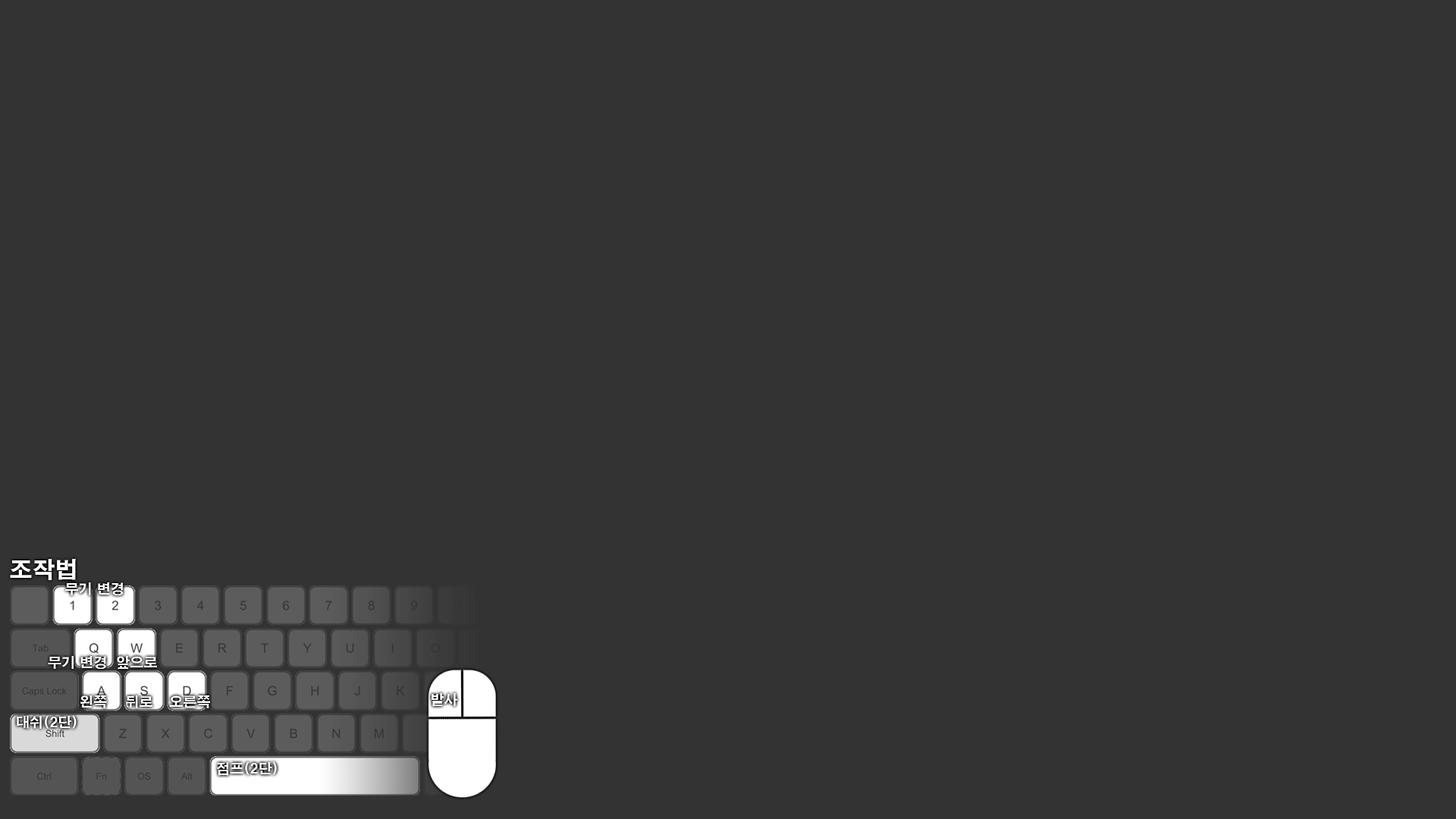
<style>
.page{position:relative;width:1456px;height:819px;background:#333333}
.page>*{position:absolute;margin:0}
.t1{font:22.7px "H2gtrE";color:#ffffff;text-transform:uppercase}
.t2{font:13.7px "H2gtrE";color:#ffffff;text-transform:uppercase}
</style>
<div class="page">
<p class="t1" style="left:10px;top:559px;width:66px;height:21px">조작법</p>
<p class="t2" style="left:65px;top:582px;width:59px;height:13px">무기 변경</p>
<p class="t2" style="left:48px;top:656px;width:58px;height:13px">무기 변경</p>
<p class="t2" style="left:117px;top:656px;width:40px;height:13px">앞으로</p>
<p class="t2" style="left:80px;top:695px;width:27px;height:13px">왼쪽</p>
<p class="t2" style="left:126px;top:695px;width:26px;height:13px">뒤로</p>
<p class="t2" style="left:169px;top:695px;width:41px;height:13px">오른쪽</p>
<p class="t2" style="left:431px;top:693px;width:26px;height:13px">발사</p>
<p class="t2" style="left:17px;top:715px;width:60px;height:14px">대쉬(2단)</p>
<p class="t2" style="left:216px;top:761px;width:61px;height:15px">점프(2단)</p>
</div>
